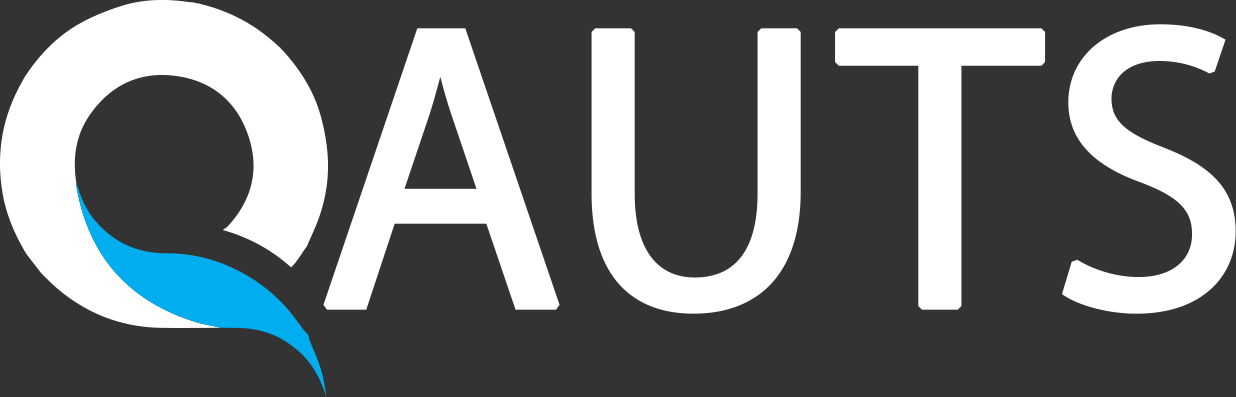
<style>
.page{position:relative;width:1236px;height:397px;background:#333333}
.page>*{position:absolute;margin:0}
.t1{font:406px "MyriadPro-Regular";color:#ffffff;text-transform:uppercase;font-weight:bold}
</style>
<div class="page">
<p class="t1" style="left:323px;top:24px;width:913px;height:290px">AUTS</p>
</div>
